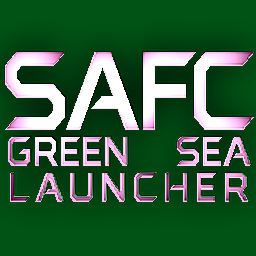
<style>
.page{position:relative;width:256px;height:256px}
.page>*{position:absolute;margin:0}
.t1{font:46.6px/36px "AMDRTG";letter-spacing:-0.34em;scale:0.83 1}
.t2{font:124.8px/49.9px "AMDRTG";letter-spacing:-0.34em;scale:0.83 1}
.t3{font:46.6px/36px "AMDRTG";letter-spacing:-0.2em;scale:0.83 1}
</style>
<div class="page">
<p class="t1" style="left:5px;top:52px;width:249px;height:150px;text-align:center"><span class="t2">safc<br></span>green             sea<br><span class="t3">launcher</span></p>
</div>
